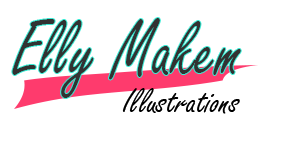
<style>
.page{position:relative;width:284px;height:156px;background:#ffffff}
.page>*{position:absolute;margin:0}
.t1{font:20.5px "FreestyleScript-Regular";color:#323232;scale:0.83 1}
.t2{font:37.5px "FreestyleScript-Regular";color:#000000}
</style>
<div class="page">
<p class="t1" style="left:12px;top:18px;width:229px;height:80px">Elly Makem</p>
<p class="t2" style="left:122px;top:88px;width:118px;height:26px">Illustrations</p>
</div>
